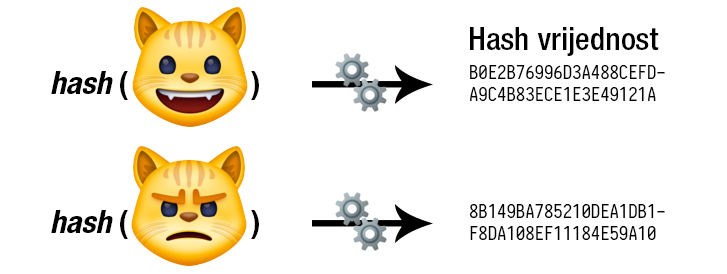
<style>
.page{position:relative;width:727px;height:274px;background:#ffffff}
.page>*{position:absolute;margin:0}
.t1{font:32px "HelveticaNeueLTStd-MdCn";color:#000000}
.t2{font:18.7px "Iosevka";color:#000000}
.t3{font:32px "HelveticaNeueLTStd-BdCn";color:#000000}
.t4{font:32px "HelveticaNeueLTStd-BdCnO";color:#000000}
</style>
<div class="page">
<p class="t1" style="left:470px;top:27px;width:189px;height:29px">Hash vrijednost</p>
<p class="t2" style="left:470px;top:65px;width:195px;height:36px">B0E2B76996D3A488CEFD-<br>A9C4B83ECE1E3E49121A</p>
<p class="t3" style="left:51px;top:71px;width:208px;height:29px"><span class="t4">hash </span>(                )</p>
<p class="t2" style="left:469px;top:204px;width:196px;height:36px">8B149BA785210DEA1DB1-<br>F8DA108EF11184E59A10</p>
<p class="t3" style="left:51px;top:210px;width:208px;height:29px"><span class="t4">hash </span>(                )</p>
</div>
